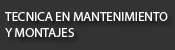
<style>
.page{position:relative;width:175px;height:50px;background:#333333}
.page>*{position:absolute;margin:0}
.t1{font:13px "MyriadPro-Regular";color:#ffffff}
</style>
<div class="page">
<p class="t1" style="left:5px;top:12px;width:163px;height:25px">TECNICA EN MANTENIMIENTO<br>Y MONTAJES</p>
</div>
